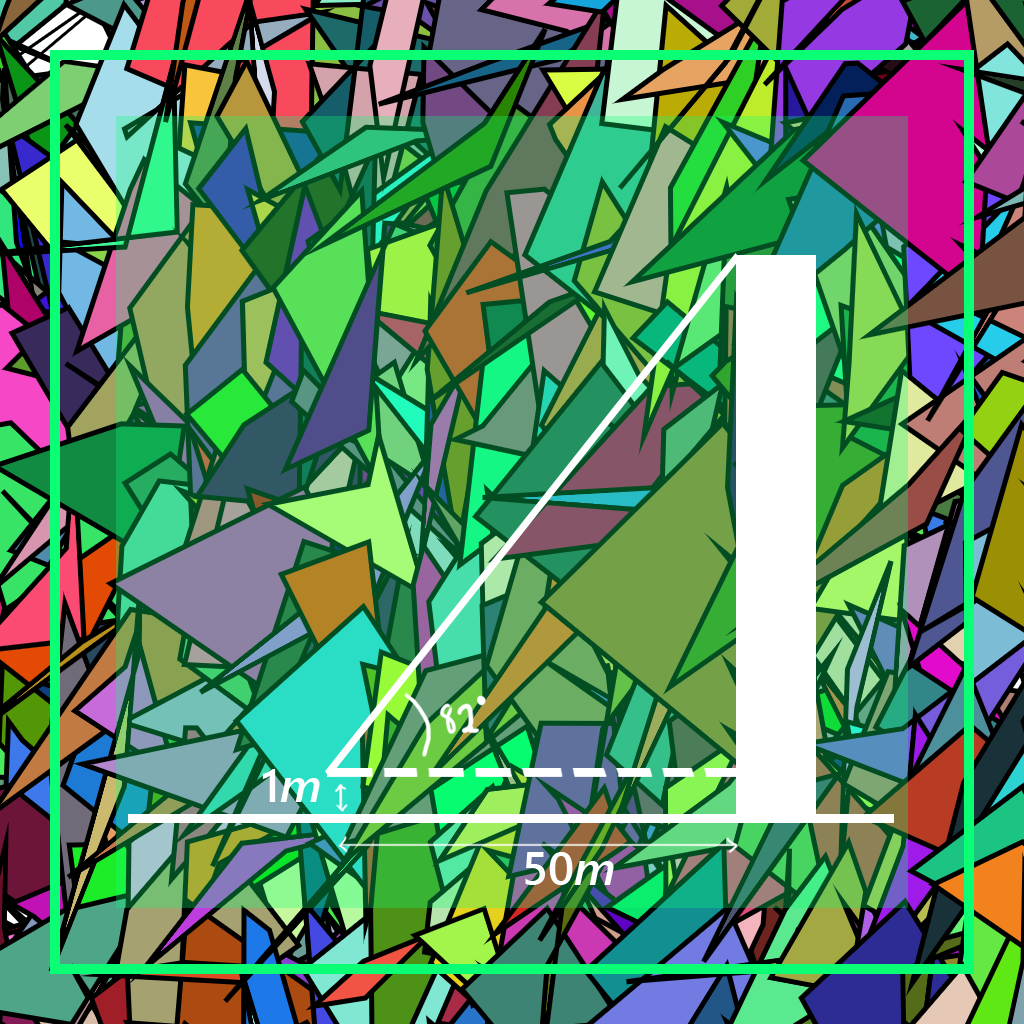
<style>
.page{position:relative;width:1024px;height:1024px}
.page>*{position:absolute;margin:0}
.t1{font:47.5px "SegoeUI-Semibold";color:#ffffff}
.t2{font:47.5px "SegoeUI-SemiboldItalic";color:#ffffff}
</style>
<div class="page">
<p class="t1" style="left:262px;top:769px;width:58px;height:33px">1<span class="t2">m</span></p>
<p class="t1" style="left:525px;top:852px;width:89px;height:33px">50<span class="t2">m</span></p>
</div>
